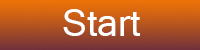
<style>
.page{position:relative;width:200px;height:50px}
.page>*{position:absolute;margin:0}
.t1{font:36px "Mangal";color:#ffffff}
</style>
<div class="page">
<p class="t1" style="left:63px;top:9px;width:77px;height:27px">Start</p>
</div>
